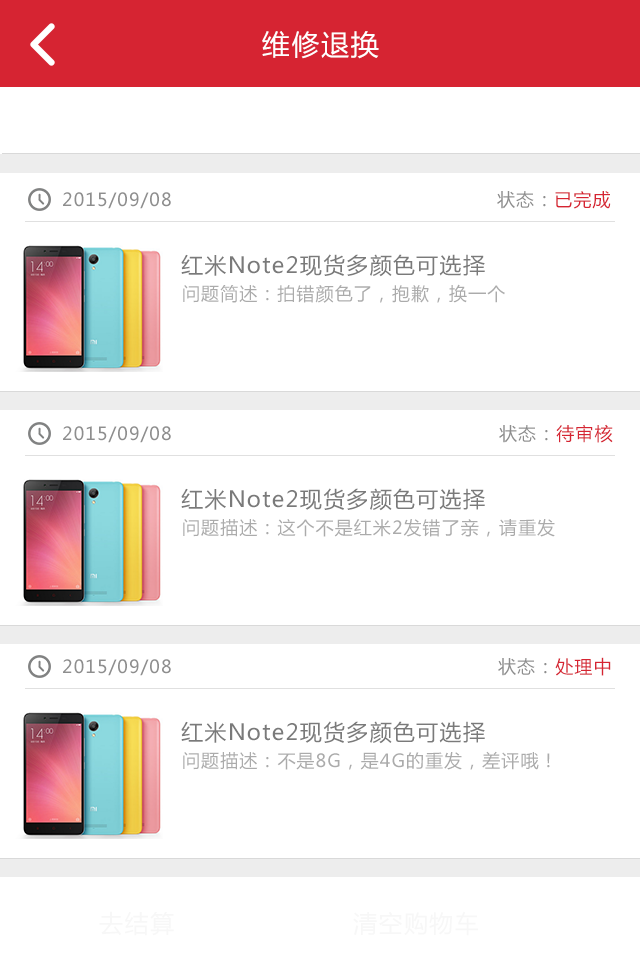
<style>
.page{position:relative;width:640px;height:960px;background:#ffffff}
.page>*{position:absolute;margin:0}
.t1{font:28px "MicrosoftYaHei";letter-spacing:0.06em;color:#ffffff}
.t2{font:18px "MicrosoftYaHei";letter-spacing:0.06em;color:#8e8e8e}
.t3{font:18px "MicrosoftYaHei";letter-spacing:0.06em;color:#d62432}
.t4{font:22px "MicrosoftYaHei";letter-spacing:0.06em;color:#7a7a7a}
.t5{font:18px "MicrosoftYaHei";letter-spacing:0.06em;color:#ababab}
.t6{font:24px "MicrosoftYaHei";letter-spacing:0.06em;color:#f7f7f7}
</style>
<div class="page">
<p class="t1" style="left:262px;top:31px;width:117px;height:28px">维修退换</p>
<p class="t2" style="left:63px;top:192px;width:108px;height:17px">2015/09/08</p>
<p class="t2" style="left:497px;top:191px;width:114px;height:18px">状态：<span class="t3">已完成</span></p>
<p class="t4" style="left:181px;top:254px;width:304px;height:23px">红米Note2现货多颜色可选择</p>
<p class="t5" style="left:183px;top:284px;width:322px;height:19px">问题简述：拍错颜色了，抱歉，换一个</p>
<p class="t2" style="left:499px;top:424px;width:114px;height:19px">状态：<span class="t3">待审核</span></p>
<p class="t2" style="left:63px;top:426px;width:108px;height:17px">2015/09/08</p>
<p class="t4" style="left:181px;top:488px;width:304px;height:23px">红米Note2现货多颜色可选择</p>
<p class="t5" style="left:183px;top:519px;width:372px;height:18px">问题描述：这个不是红米2发错了亲，请重发</p>
<p class="t2" style="left:63px;top:659px;width:108px;height:17px">2015/09/08</p>
<p class="t2" style="left:498px;top:657px;width:113px;height:19px">状态：<span class="t3">处理中</span></p>
<p class="t4" style="left:181px;top:721px;width:304px;height:23px">红米Note2现货多颜色可选择</p>
<p class="t5" style="left:183px;top:751px;width:367px;height:19px">问题描述：不是8G，是4G的重发，差评哦！</p>
<p class="t6" style="left:99px;top:911px;width:75px;height:25px">去结算</p>
<p class="t6" style="left:353px;top:911px;width:125px;height:25px">清空购物车</p>
</div>
